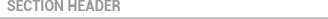
<style>
.page{position:relative;width:328px;height:19px;background:#ffffff}
.page>*{position:absolute;margin:0}
.t1{font:14px "Roboto-Bold";color:#999999}
</style>
<div class="page">
<p class="t1" style="left:7px;top:0px;width:114px;height:11px">SECTION HEADER</p>
</div>
